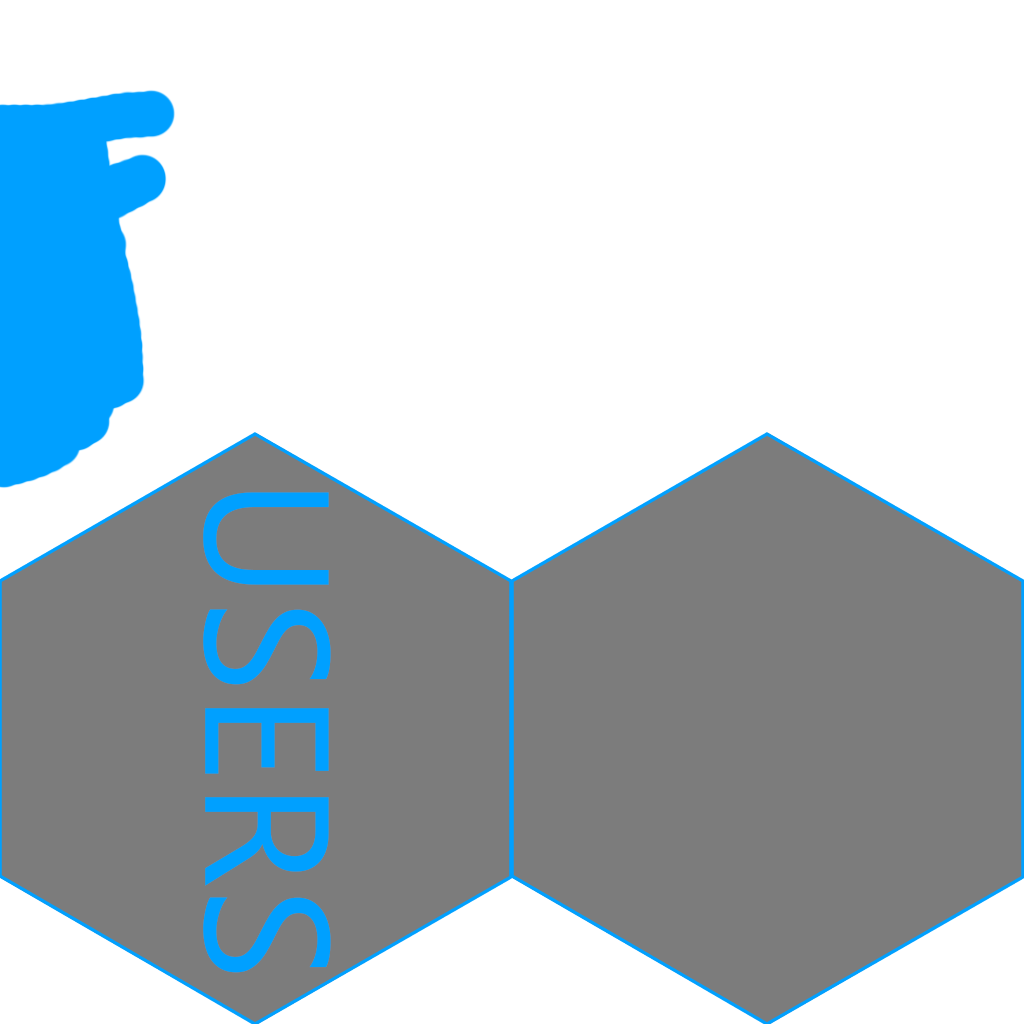
<style>
.page{position:relative;width:1024px;height:1024px;background:#ffffff}
.page>*{position:absolute;margin:0}
.t1{font:176px "SegoeUI";color:#00a0ff}
.t2{font:176px "SegoeUI";color:#ffffff}
</style>
<div class="page">
<p class="t1" style="left:203px;top:492px;width:128px;height:481px;rotate:90deg"><span class="t2"><br><br><br><br><br><br><br><br><br><br><br><br><br><br><br><br></span>USERS</p>
</div>
